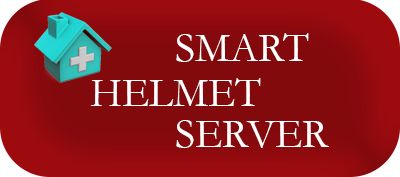
<style>
.page{position:relative;width:400px;height:177px;background:#82090c}
.page>*{position:absolute;margin:0}
.t1{font:41.7px "Garamond";color:#ffffff}
</style>
<div class="page">
<p class="t1" style="left:176px;top:33px;width:133px;height:29px">SMART</p>
<p class="t1" style="left:90px;top:78px;width:171px;height:28px">HELMET</p>
<p class="t1" style="left:176px;top:120px;width:153px;height:28px">SERVER</p>
</div>
